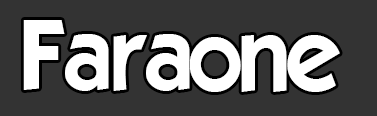
<style>
.page{position:relative;width:377px;height:116px;background:#333333}
.page>*{position:absolute;margin:0}
.t1{font:100px "ELEGANCE";color:#ffffff}
</style>
<div class="page">
<p class="t1" style="left:23px;top:20px;width:317px;height:72px">Faraone</p>
</div>
